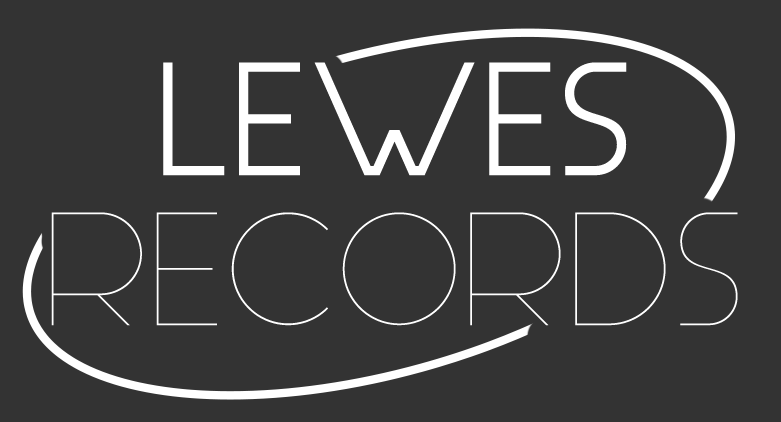
<style>
.page{position:relative;width:781px;height:422px;background:#333333}
.page>*{position:absolute;margin:0}
.t1{font:150px/150px "Aspergit-Light";color:#ffffff}
.t2{font:150px/150px "Aspergit-Bold";color:#ffffff}
</style>
<div class="page">
<p class="t1" style="left:51px;top:62px;width:687px;height:264px;text-align:center"><span class="t2">LEWES </span>RECORDS</p>
</div>
